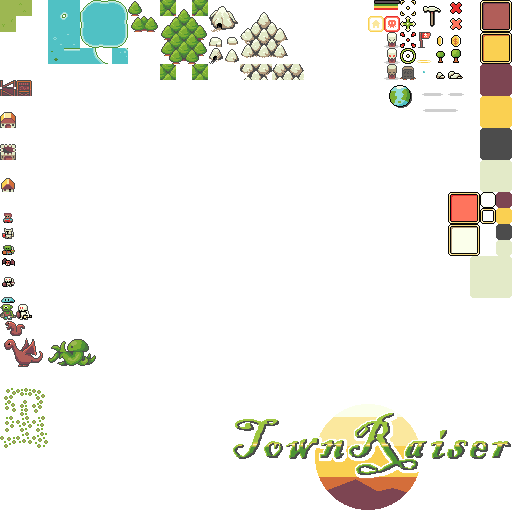
<style>
.page{position:relative;width:512px;height:512px;background:#ffffff}
.page>*{position:absolute;margin:0}
.t1{font:58.3px "BlackadderITC-Regular";letter-spacing:-0.025em;font-weight:bold}
</style>
<div class="page">
<p class="t1" style="left:233px;top:413px;width:278px;height:62px">TownRaiser</p>
</div>
